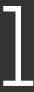
<style>
.page{position:relative;width:34px;height:92px;background:#333333}
.page>*{position:absolute;margin:0}
.t1{font:114.3px "NexaLight";color:#ffffff;scale:0.91 1}
</style>
<div class="page">
<p class="t1" style="left:3px;top:6px;width:31px;height:80px">1</p>
</div>
